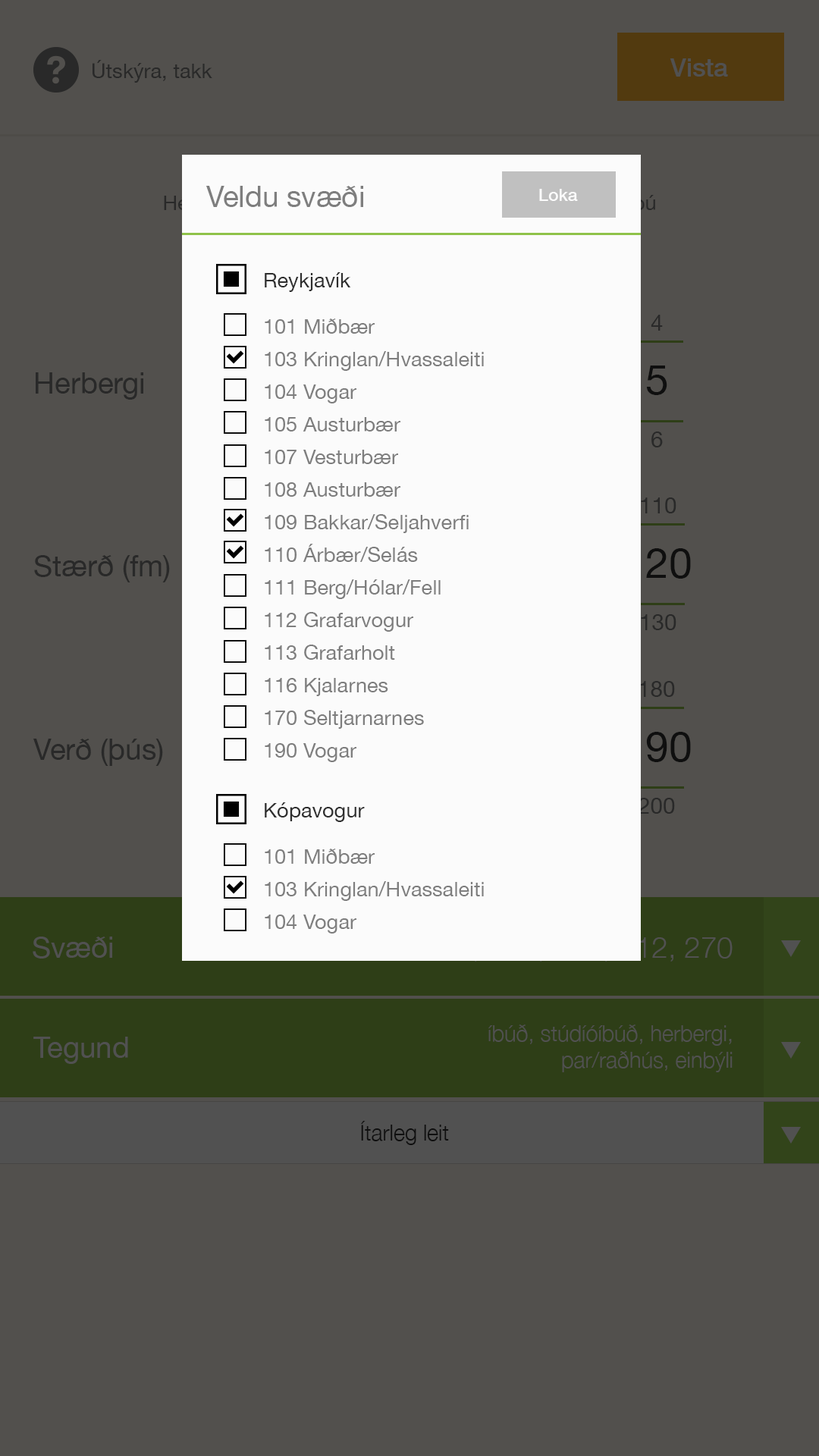
<style>
.page{position:relative;width:819px;height:1456px;background:#52504d}
.page>*{position:absolute;margin:0}
.t1{font:20.4px "HelveticaNeue";color:#292929}
.t2{font:25.5px "HelveticaNeue-Medium";color:#515151}
.t3{font:29.5px "HelveticaNeue";color:#7e7e7e}
.t4{font:17.3px "HelveticaNeue-Medium";color:#fbfbfb}
.t5{font:20.4px "HelveticaNeue";color:#2e2e2e}
.t6{font:22.8px "HelveticaNeue";color:#292929}
.t7{font:20.4px/32.6px "HelveticaNeue";color:#7e7e7e}
.t8{font:41.8px "HelveticaNeue";color:#0f0f0f}
.t9{font:29.5px "HelveticaNeue";color:#292929}
.t10{font:29.5px "HelveticaNeue";color:#515151}
.t11{font:22.2px "HelveticaNeue-Light";color:#515151}
.t12{font:22.2px "HelveticaNeue-Light";color:#0f0f0f}
</style>
<div class="page">
<p class="t1" style="left:93px;top:60px;width:119px;height:23px">Útskýra, takk</p>
<p class="t2" style="left:670px;top:58px;width:58px;height:19px">Vista</p>
<p class="t3" style="left:206px;top:186px;width:157px;height:21px">Veldu svæði</p>
<p class="t4" style="left:539px;top:189px;width:39px;height:12px">Loka</p>
<p class="t5" style="left:265px;top:272px;width:86px;height:20px">Reykjavík</p>
<p class="t6" style="left:651px;top:315px;width:12px;height:16px">4</p>
<p class="t7" style="left:265px;top:318px;width:219px;height:444px">101 Miðbær<br>103 Kringlan/Hvassaleiti<br>104 Vogar<br>105 Austurbær<br>107 Vesturbær<br>108 Austurbær<br>109 Bakkar/Seljahverfi<br>110 Árbær/Selás<br>111 Berg/Hólar/Fell<br>112 Grafarvogur<br>113 Grafarholt<br>116 Kjalarnes<br>170 Seltjarnarnes<br>190 Vogar</p>
<p class="t8" style="left:646px;top:366px;width:21px;height:29px">5</p>
<p class="t9" style="left:36px;top:372px;width:107px;height:28px">Herbergi</p>
<p class="t6" style="left:651px;top:431px;width:12px;height:16px">6</p>
<p class="t6" style="left:641px;top:497px;width:35px;height:16px">110</p>
<p class="t9" style="left:34px;top:555px;width:136px;height:27px">Stærð (fm)</p>
<p class="t6" style="left:641px;top:614px;width:35px;height:16px">130</p>
<p class="t6" style="left:639px;top:681px;width:36px;height:16px">180</p>
<p class="t9" style="left:33px;top:739px;width:130px;height:27px">Verð (þús)</p>
<p class="t5" style="left:265px;top:802px;width:100px;height:20px">Kópavogur</p>
<p class="t7" style="left:265px;top:849px;width:219px;height:84px">101 Miðbær<br>103 Kringlan/Hvassaleiti<br>104 Vogar</p>
<p class="t10" style="left:33px;top:937px;width:79px;height:22px">Svæði</p>
<p class="t11" style="left:488px;top:1024px;width:245px;height:48px;text-align:right">íbúð, stúdíóíbúð, herbergi,<br>par/raðhús, einbýli</p>
<p class="t10" style="left:33px;top:1037px;width:95px;height:27px">Tegund</p>
<p class="t12" style="left:361px;top:1121px;width:88px;height:24px">Ítarleg leit</p>
</div>
